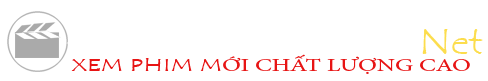
<style>
.page{position:relative;width:488px;height:81px;background:#ffffff}
.page>*{position:absolute;margin:0}
.t1{font:18px "MinionPro-Regular";color:#e71414;scale:1.4 1}
.t2{font:18px "TempusSansITC";color:#e71414;scale:1.4 1}
</style>
<div class="page">
<p class="t1" style="left:71px;top:54px;width:399px;height:20px"><span class="t2">XEM PHIM M</span>ỚI CHẤT LƯỢNG CAO</p>
</div>
